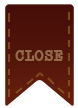
<style>
.page{position:relative;width:78px;height:108px;background:#ffffff}
.page>*{position:absolute;margin:0}
.t1{font:16px "EricaType-Bold";color:#936a4b}
</style>
<div class="page">
<p class="t1" style="left:15px;top:50px;width:48px;height:11px">CLOSE</p>
</div>
